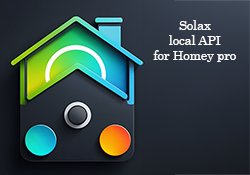
<style>
.page{position:relative;width:250px;height:175px}
.page>*{position:absolute;margin:0}
.t1{font:12.5px "Century";color:#ffffff}
</style>
<div class="page">
<p class="t1" style="left:153px;top:20px;width:83px;height:42px;text-align:center">Solax<br>local API<br>for Homey pro</p>
</div>
